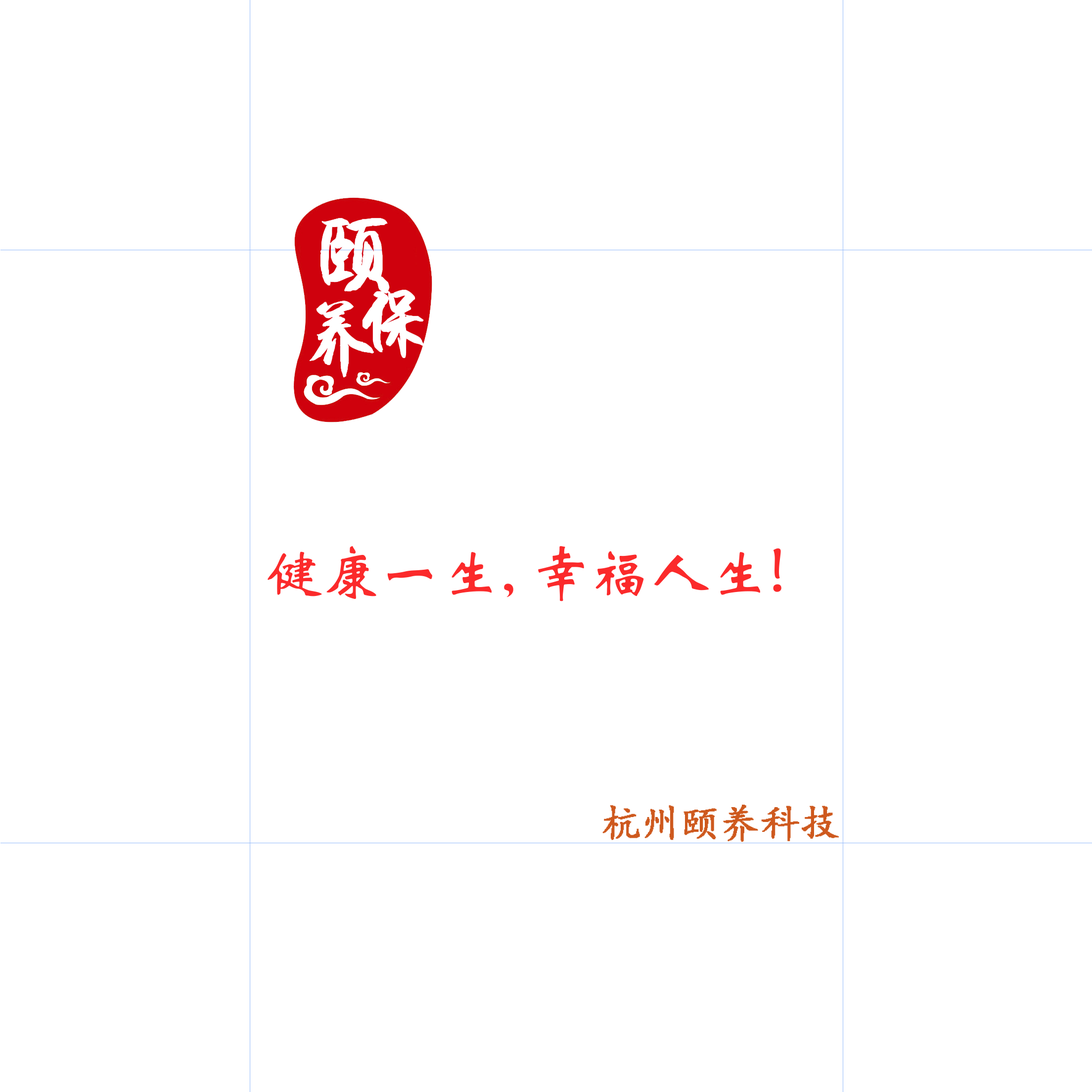
<style>
.page{position:relative;width:1092px;height:1092px;background:#ffffff}
.page>*{position:absolute;margin:0}
.t1{font:59.3px "STXinwei";color:#fb2a2b}
.t2{font:39.6px "¿¬Ìå";color:#ce591e;font-weight:bold}
</style>
<div class="page">
<p class="t1" style="left:268px;top:546px;width:513px;height:55px">健康一生, 幸福人生!</p>
<p class="t2" style="left:602px;top:805px;width:237px;height:37px">杭州颐养科技</p>
</div>
